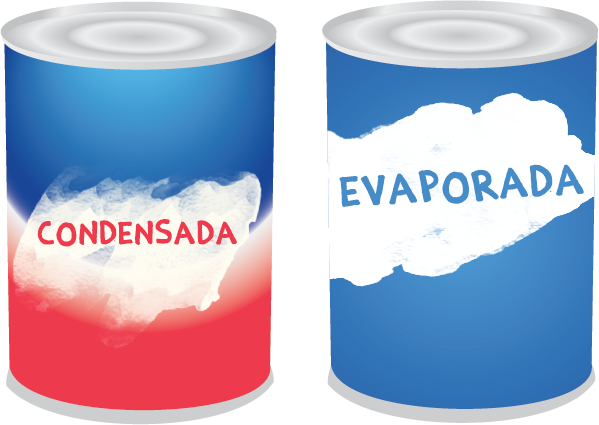
<style>
.page{position:relative;width:599px;height:425px}
.page>*{position:absolute;margin:0}
.t1{font:40px "EstoyBueno";letter-spacing:0.024em;color:#458cc9;font-weight:bold}
.t2{font:30px "EstoyBueno";letter-spacing:0.024em;color:#ee3a4d;font-weight:bold}
</style>
<div class="page">
<p class="t1" style="left:339px;top:164px;width:245px;height:44px;rotate:-3deg">evaporada</p>
<p class="t2" style="left:37px;top:218px;width:200px;height:29px">condensada</p>
</div>
